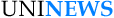
<style>
.page{position:relative;width:114px;height:18px;background:#ffffff}
.page>*{position:absolute;margin:0}
.t1{font:22px "BookAntiqua-Bold";letter-spacing:0.02em;color:#0180ff}
.t2{font:22px "BookAntiqua";letter-spacing:0.02em;color:#000000}
</style>
<div class="page">
<p class="t1" style="left:1px;top:0px;width:112px;height:17px"><span class="t2">UNI</span>NEWS</p>
</div>
